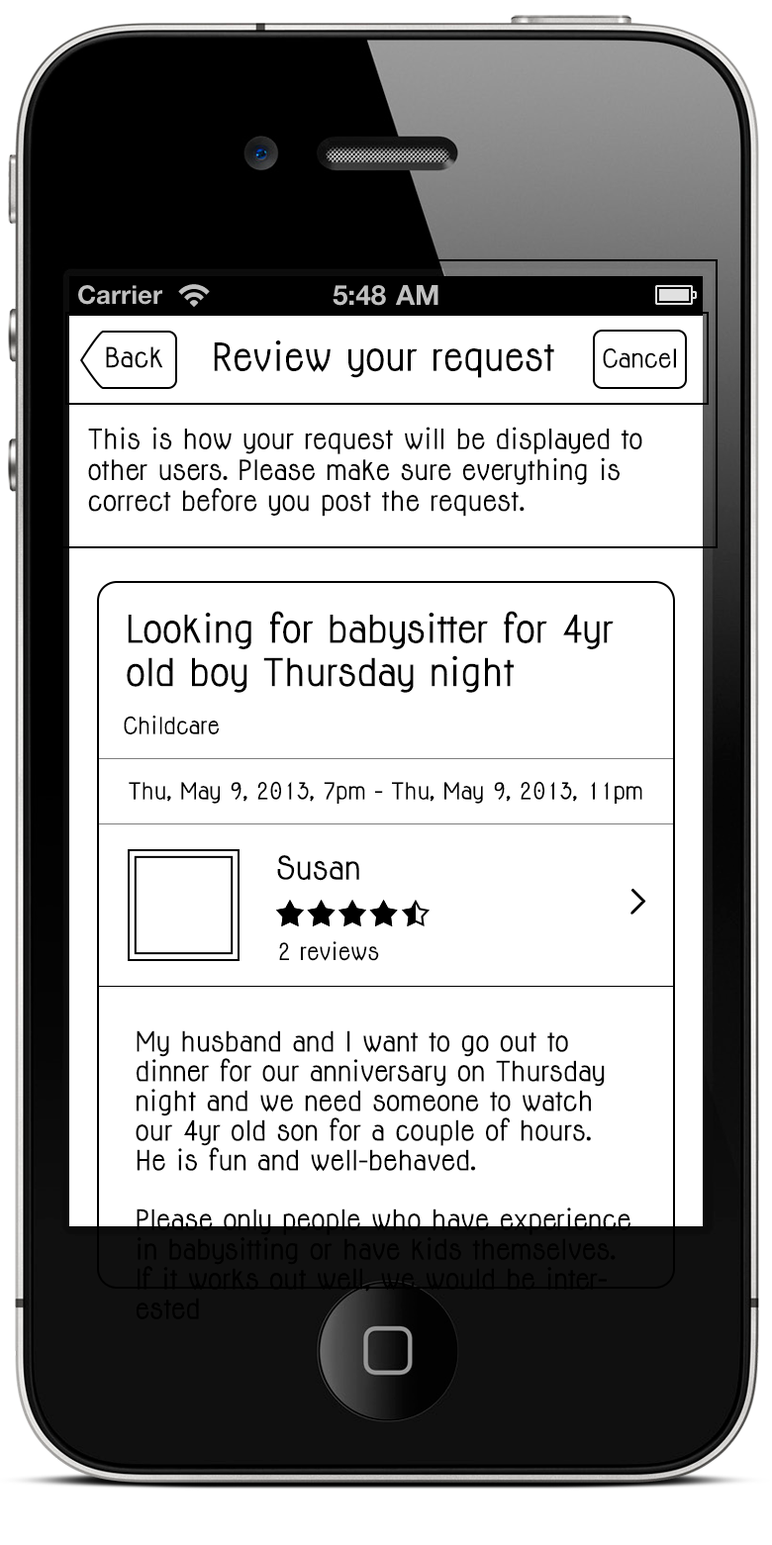
<style>
.page{position:relative;width:772px;height:1545px;background:#ffffff}
.page>*{position:absolute;margin:0}
.t1{font:35.6px "Jolly-Bold";color:#000000}
.t2{font:25.7px "Jolly-Bold";color:#000000}
.t3{font:23.8px "Jolly-Bold";color:#000000}
.t4{font:35.4px/43.2px "Jolly-Bold";color:#000000}
.t5{font:21.8px "Jolly-Bold";color:#000000}
.t6{font:29.7px "Jolly-Bold";color:#000000}
.t7{font:25.7px/29.7px "Jolly-Bold";color:#000000}
</style>
<div class="page">
<p class="t1" style="left:214px;top:340px;width:340px;height:38px">Review your request</p>
<p class="t2" style="left:106px;top:346px;width:57px;height:22px">Back</p>
<p class="t3" style="left:603px;top:348px;width:73px;height:20px">Cancel</p>
<p class="t2" style="left:88px;top:427px;width:554px;height:90px">This is how your request will be displayed to other users. Please make sure everything is   correct before you post the request.</p>
<p class="t4" style="left:127px;top:611px;width:487px;height:82px">Looking for babysitter for 4yr old boy Thursday night</p>
<p class="t5" style="left:124px;top:715px;width:96px;height:19px">Childcare</p>
<p class="t5" style="left:129px;top:781px;width:513px;height:23px">Thu, May 9, 2013, 7pm - Thu, May 9, 2013, 11pm</p>
<p class="t6" style="left:277px;top:855px;width:82px;height:26px">Susan</p>
<p class="t5" style="left:279px;top:941px;width:100px;height:20px">2 reviews</p>
<p class="t7" style="left:136px;top:1030px;width:494px;height:289px">My husband and I want to go out to dinner for our anniversary on Thursday night and we need someone to watch our 4yr old son for a couple of hours. <br>He is fun and well-behaved.<br><br>Please only people who have experience in babysitting or have kids themselves. If it works out well, we would be interested</p>
</div>
